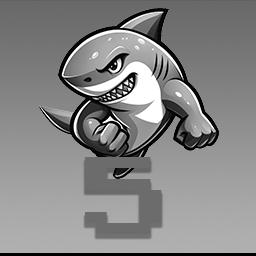
<style>
.page{position:relative;width:256px;height:256px}
.page>*{position:absolute;margin:0}
.t1{font:87.2px "PressStart2P-Regular";color:#6c6c6c}
</style>
<div class="page">
<p class="t1" style="left:85px;top:157px;width:77px;height:77px">5</p>
</div>
